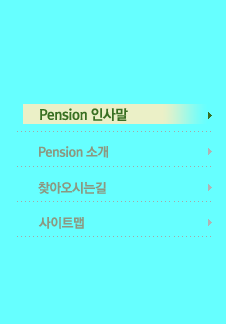
<style>
.page{position:relative;width:226px;height:324px;background:#66ffff}
.page>*{position:absolute;margin:0}
.t1{font:14px "RixGoB";letter-spacing:-0.025em;color:#396f22}
.t2{font:13px "RixGoB";letter-spacing:-0.025em;color:#8c9881}
</style>
<div class="page">
<p class="t1" style="left:40px;top:108px;width:88px;height:13px">Pension 인사말</p>
<p class="t2" style="left:39px;top:146px;width:69px;height:12px">Pension 소개</p>
<p class="t2" style="left:38px;top:182px;width:68px;height:12px">찾아오시는길</p>
<p class="t2" style="left:38px;top:217px;width:46px;height:12px">사이트맵</p>
</div>
